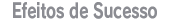
<style>
.page{position:relative;width:170px;height:22px;background:#ffffff}
.page>*{position:absolute;margin:0}
.t1{font:20px "RodinPro-B";color:#8b8c92;scale:0.74 1}
</style>
<div class="page">
<p class="t1" style="left:13px;top:2px;width:144px;height:17px">Efeitos de Sucesso</p>
</div>
